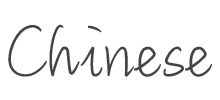
<style>
.page{position:relative;width:220px;height:100px;background:#ffffff}
.page>*{position:absolute;margin:0}
.t1{font:77.2px "MLingWaiMedium-SC";color:#444444}
</style>
<div class="page">
<p class="t1" style="left:8px;top:24px;width:204px;height:53px">Chinese</p>
</div>
